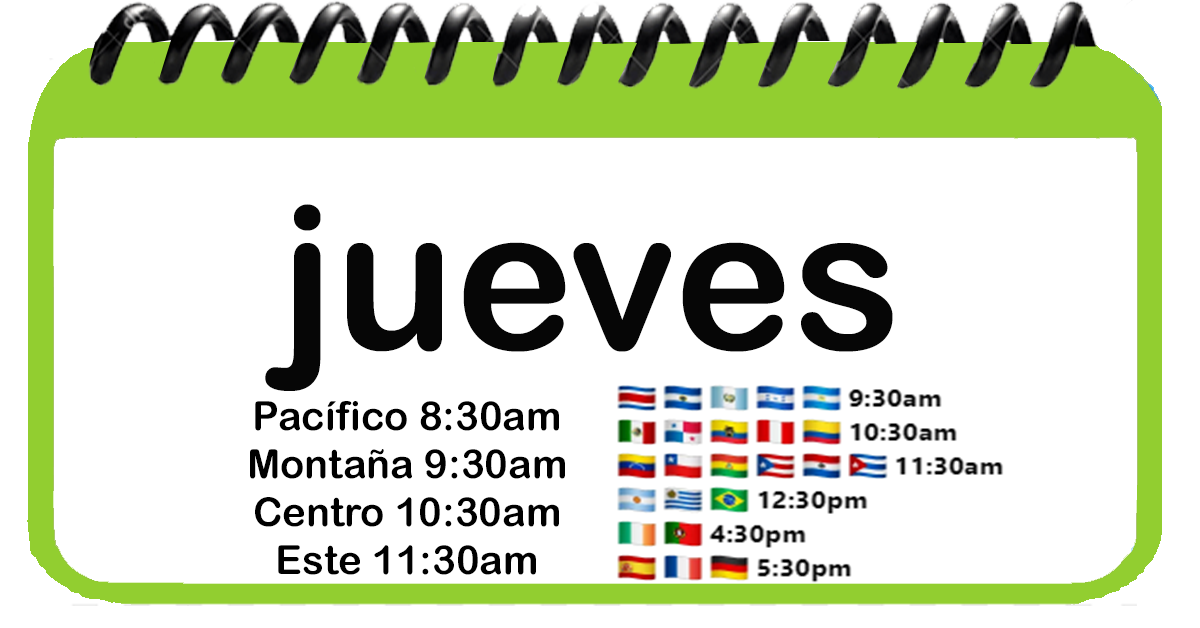
<style>
.page{position:relative;width:1200px;height:628px;background:#ffffff}
.page>*{position:absolute;margin:0}
.t1{font:200px "ArialRoundedMTBold";color:#060606}
.t2{font:40px "ArialRoundedMTBold";color:#000000}
</style>
<div class="page">
<p class="t1" style="left:265px;top:204px;width:628px;height:187px">jueves</p>
<p class="t2" style="left:250px;top:401px;width:315px;height:174px;text-align:center">Pacífico 8:30am<br>Montaña 9:30am<br>Centro 10:30am<br>Este 11:30am</p>
</div>
